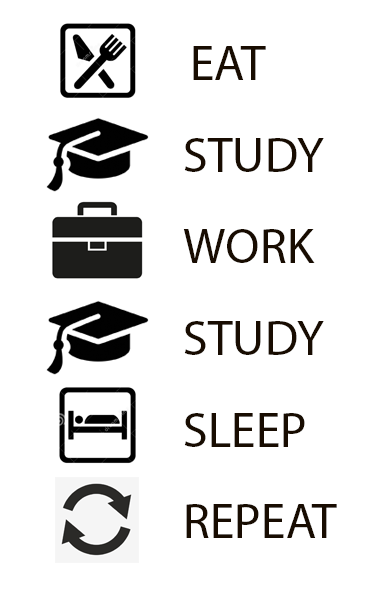
<style>
.page{position:relative;width:376px;height:600px;background:#ffffff}
.page>*{position:absolute;margin:0}
.t1{font:12px/91.7px "MyriadPro-Regular";color:#180c01}
</style>
<div class="page">
<p class="t1" style="left:183px;top:46px;width:154px;height:492px">EAT<br>STUDY<br>WORK<br>STUDY<br>SLEEP<br>REPEAT</p>
</div>
